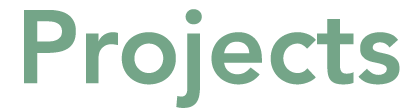
<style>
.page{position:relative;width:415px;height:108px;background:#ffffff}
.page>*{position:absolute;margin:0}
.t1{font:103.1px "Avenir-Heavy";color:#74a588}
</style>
<div class="page">
<p class="t1" style="left:24px;top:9px;width:376px;height:99px">Projects</p>
</div>
